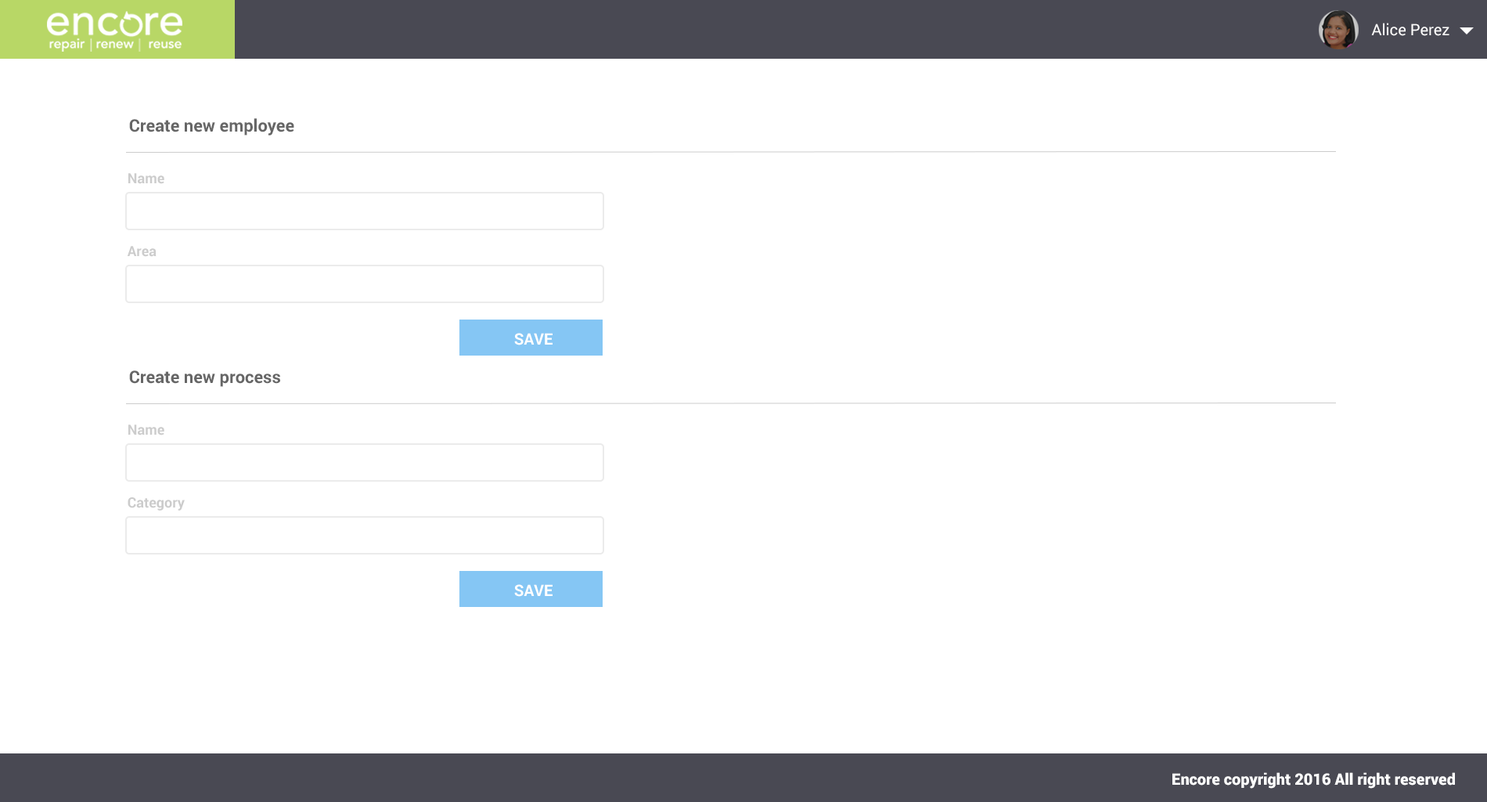
<style>
.page{position:relative;width:1487px;height:802px;background:#ffffff}
.page>*{position:absolute;margin:0}
.t1{font:15.7px "Roboto-Regular";color:#fffefe}
.t2{font:17.2px "Roboto-Bold";color:#666666}
.t3{font:14.1px "Roboto-Bold";color:#cccccc}
.t4{font:15.7px "Roboto-Bold";color:#ffffff}
.t5{font:15.7px "Roboto-Black";color:#ffffff}
</style>
<div class="page">
<p class="t1" style="left:1372px;top:23px;width:78px;height:13px">Alice Perez</p>
<p class="t2" style="left:129px;top:118px;width:165px;height:17px">Create new employee</p>
<p class="t3" style="left:128px;top:173px;width:36px;height:11px">Name</p>
<p class="t3" style="left:127px;top:246px;width:30px;height:11px">Area</p>
<p class="t4" style="left:514px;top:333px;width:39px;height:12px">SAVE</p>
<p class="t2" style="left:129px;top:370px;width:151px;height:17px">Create new process</p>
<p class="t3" style="left:128px;top:424px;width:36px;height:11px">Name</p>
<p class="t3" style="left:128px;top:497px;width:57px;height:13px">Category</p>
<p class="t4" style="left:514px;top:584px;width:39px;height:13px">SAVE</p>
<p class="t5" style="left:1173px;top:772px;width:282px;height:16px">Encore copyright 2016 All right reserved</p>
</div>
